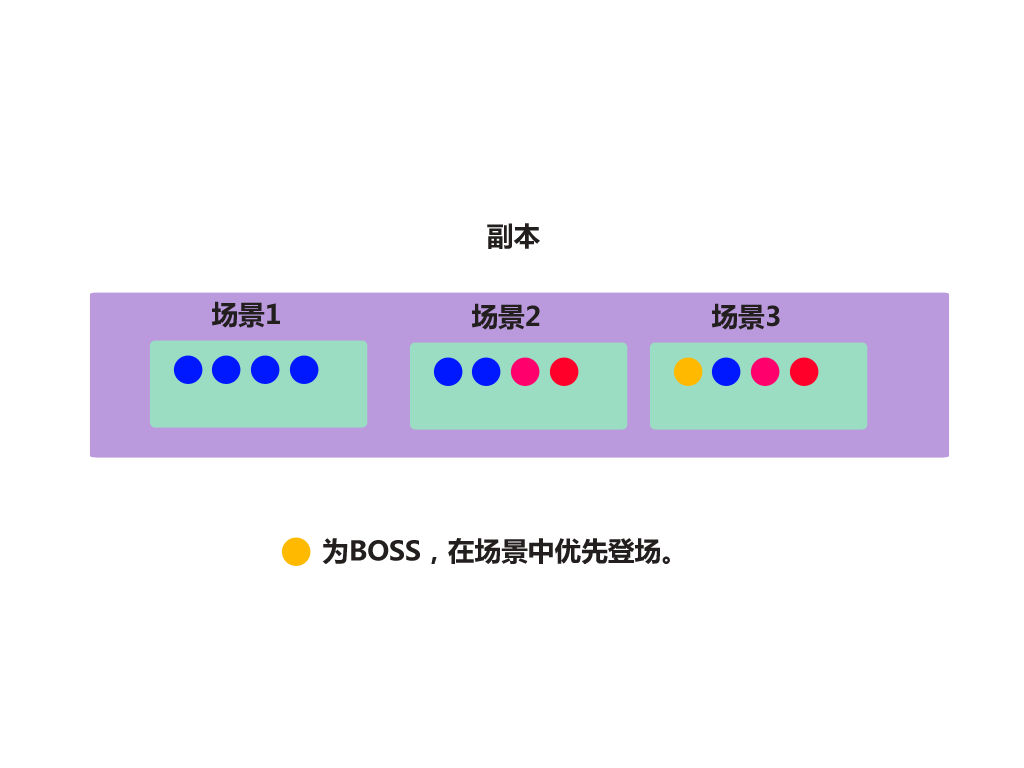
<style>
.page{position:relative;width:1024px;height:768px;background:#ffffff}
.page>*{position:absolute;margin:0}
.t1{font:26.7px "MicrosoftYaHei";color:#231f1f}
</style>
<div class="page">
<p class="t1" style="left:487px;top:223px;width:53px;height:26px">副本</p>
<p class="t1" style="left:211px;top:301px;width:69px;height:27px">场景1</p>
<p class="t1" style="left:471px;top:303px;width:69px;height:27px">场景2</p>
<p class="t1" style="left:711px;top:303px;width:69px;height:27px">场景3</p>
<p class="t1" style="left:322px;top:538px;width:348px;height:27px">为BOSS，在场景中优先登场。</p>
</div>
